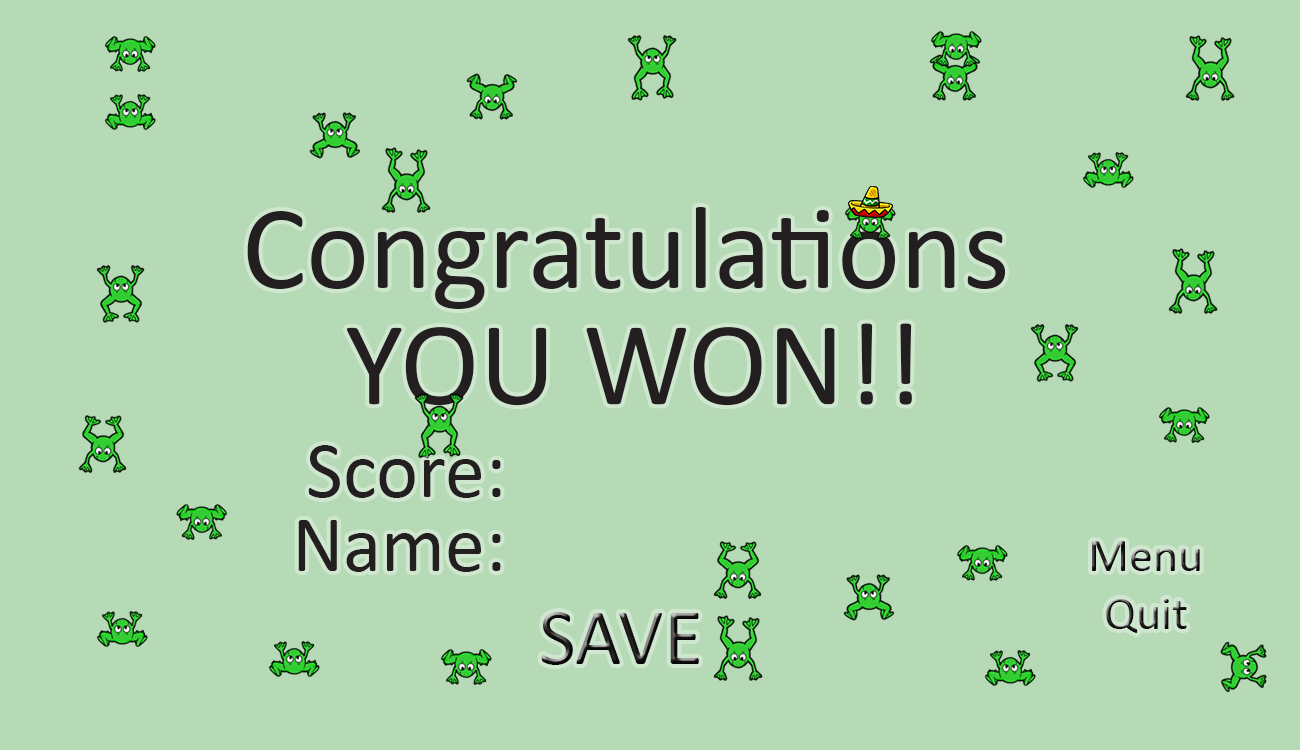
<style>
.page{position:relative;width:1300px;height:750px;background:#b5dab5}
.page>*{position:absolute;margin:0}
.t1{font:119.7px "Calibri";color:#231f20}
.t2{font:120px "Calibri";color:#231f20}
.t3{font:80px "Calibri";color:#231f20}
.t4{font:48px "Calibri"}
.t5{font:80px "Calibri"}
</style>
<div class="page">
<p class="t1" style="left:247px;top:207px;width:759px;height:102px">Congratulations</p>
<p class="t2" style="left:346px;top:323px;width:566px;height:83px">YOU WON!!</p>
<p class="t3" style="left:308px;top:445px;width:193px;height:53px">Score:</p>
<p class="t3" style="left:298px;top:520px;width:203px;height:52px">Name:</p>
<p class="t4" style="left:1092px;top:541px;width:108px;height:30px">Menu</p>
<p class="t4" style="left:1106px;top:599px;width:81px;height:34px">Quit</p>
<p class="t5" style="left:541px;top:612px;width:158px;height:53px">SAVE</p>
</div>
